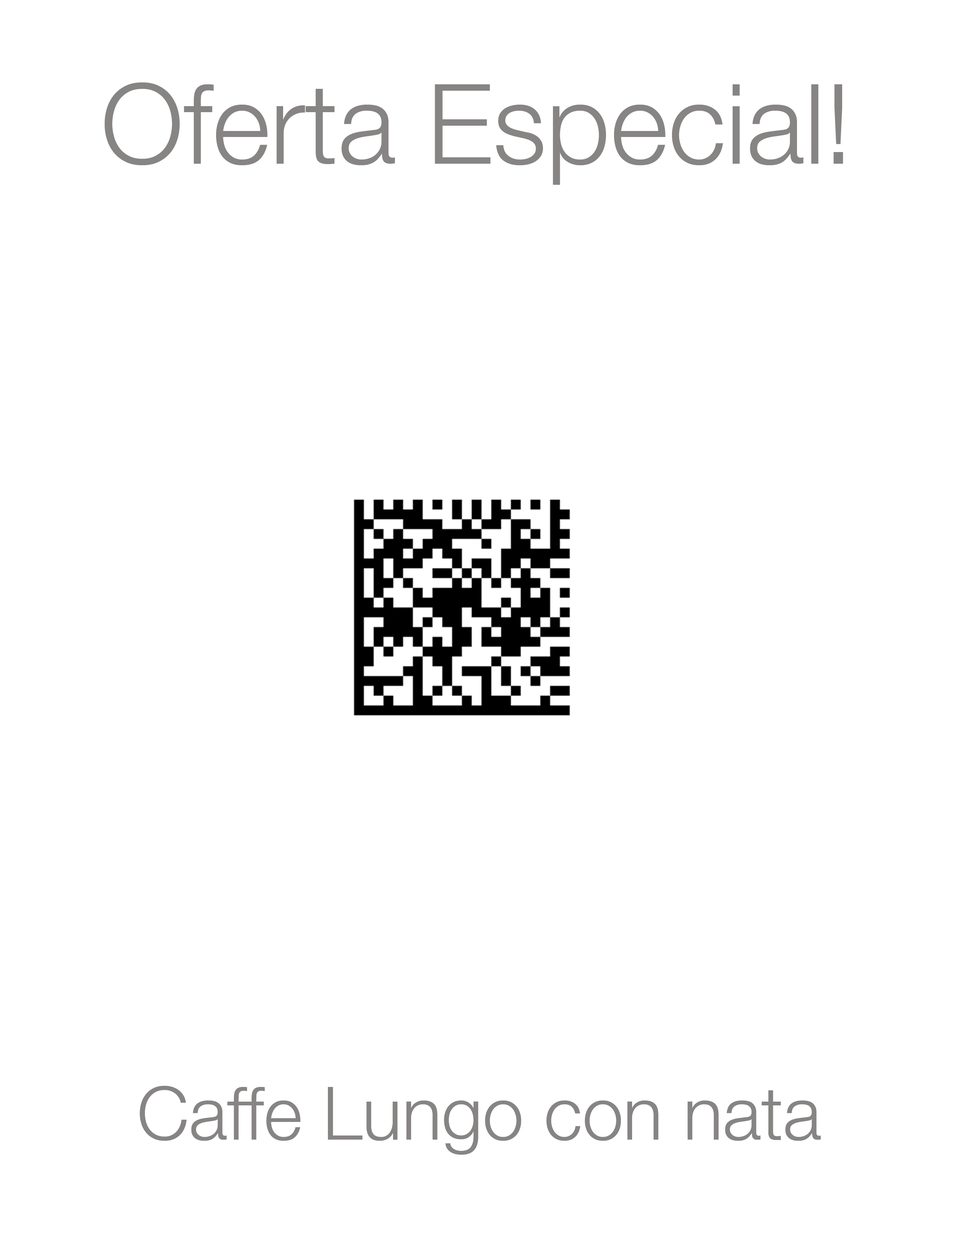
<style>
.page{position:relative;width:960px;height:1242px;background:#ffffff}
.page>*{position:absolute;margin:0}
.t1{font:111.4px "HelveticaNeue-Light";color:#878484}
.t2{font:73.7px "HelveticaNeue-Light";color:#878484}
</style>
<div class="page">
<p class="t1" style="left:105px;top:82px;width:738px;height:103px">Oferta Especial!</p>
<p class="t2" style="left:140px;top:1086px;width:681px;height:69px">Caffe Lungo con nata</p>
</div>
